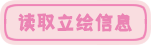
<style>
.page{position:relative;width:151px;height:45px;background:#f9dde0}
.page>*{position:absolute;margin:0}
.t1{font:12px "shetumodengxiaofangti";color:#eb84b4;font-weight:bold;scale:0.94 1}
</style>
<div class="page">
<p class="t1" style="left:18px;top:13px;width:114px;height:19px">读取立绘信息</p>
</div>
